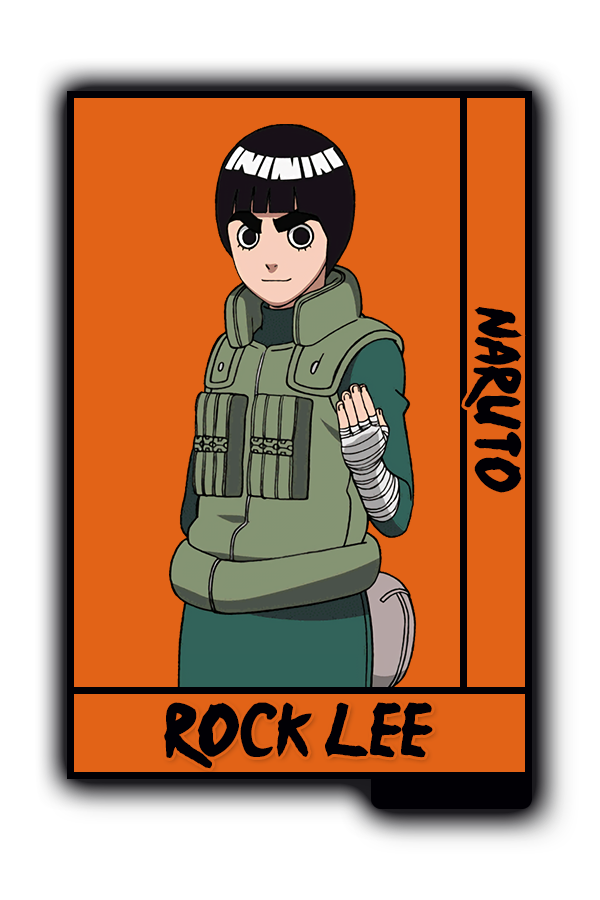
<style>
.page{position:relative;width:600px;height:900px;background:#e26317}
.page>*{position:absolute;margin:0}
.t1{font:52px "Ninja-Naruto";color:#010005}
.t2{font:60.3px "Ninja-Naruto";color:#010005}
</style>
<div class="page">
<p class="t1" style="left:464px;top:307px;width:59px;height:186px;rotate:90deg">Naruto</p>
<p class="t2" style="left:164px;top:702px;width:269px;height:67px">Rock Lee</p>
</div>
